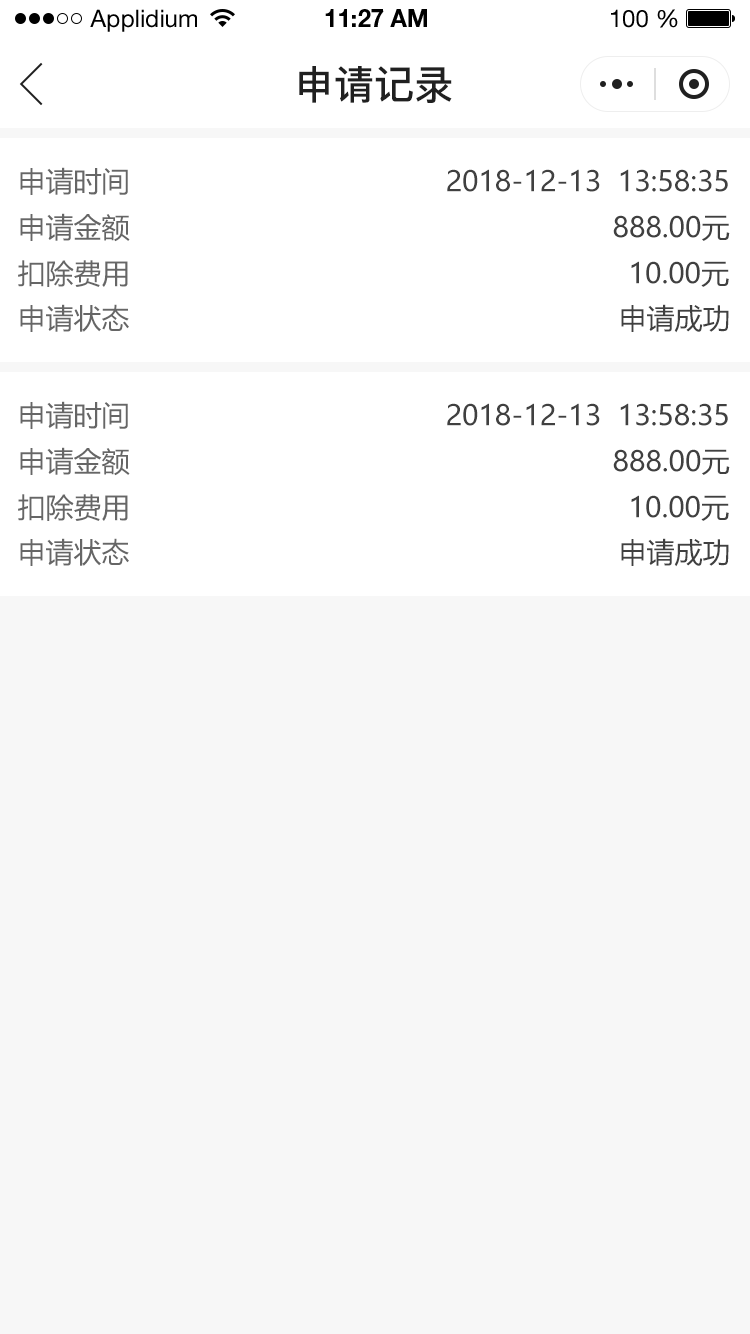
<style>
.page{position:relative;width:750px;height:1334px;background:#f7f7f7}
.page>*{position:absolute;margin:0}
.t1{font:24px "HelveticaNeueLTStd-Roman";color:#000000}
.t2{font:24px "HelveticaNeueLTStd-Bd";color:#000000}
.t3{font:40px "PingFang-SC-Bold";color:#202020;text-transform:uppercase}
.t4{font:28px "MicrosoftYaHei";color:#666666;text-transform:uppercase}
.t5{font:28px "MicrosoftYaHei";color:#404040;text-transform:uppercase}
</style>
<div class="page">
<p class="t1" style="left:90px;top:9px;width:107px;height:23px">Applidium</p>
<p class="t2" style="left:325px;top:9px;width:102px;height:18px">11:27 AM</p>
<p class="t1" style="left:611px;top:9px;width:67px;height:19px">100 %</p>
<p class="t3" style="left:299px;top:66px;width:153px;height:37px">申请记录</p>
<p class="t4" style="left:20px;top:167px;width:108px;height:28px">申请时间</p>
<p class="t5" style="left:447px;top:169px;width:281px;height:23px">2018-12-13  13:58:35</p>
<p class="t4" style="left:20px;top:213px;width:110px;height:29px">申请金额</p>
<p class="t5" style="left:613px;top:215px;width:117px;height:26px">888.00元</p>
<p class="t4" style="left:18px;top:260px;width:110px;height:27px">扣除费用</p>
<p class="t5" style="left:631px;top:261px;width:98px;height:26px">10.00元</p>
<p class="t4" style="left:20px;top:304px;width:109px;height:28px">申请状态</p>
<p class="t5" style="left:621px;top:304px;width:108px;height:29px">申请成功</p>
<p class="t4" style="left:20px;top:401px;width:108px;height:28px">申请时间</p>
<p class="t5" style="left:447px;top:403px;width:281px;height:23px">2018-12-13  13:58:35</p>
<p class="t4" style="left:20px;top:447px;width:110px;height:29px">申请金额</p>
<p class="t5" style="left:613px;top:449px;width:117px;height:26px">888.00元</p>
<p class="t4" style="left:18px;top:494px;width:110px;height:27px">扣除费用</p>
<p class="t5" style="left:631px;top:495px;width:98px;height:26px">10.00元</p>
<p class="t4" style="left:20px;top:538px;width:109px;height:28px">申请状态</p>
<p class="t5" style="left:621px;top:538px;width:108px;height:29px">申请成功</p>
</div>
